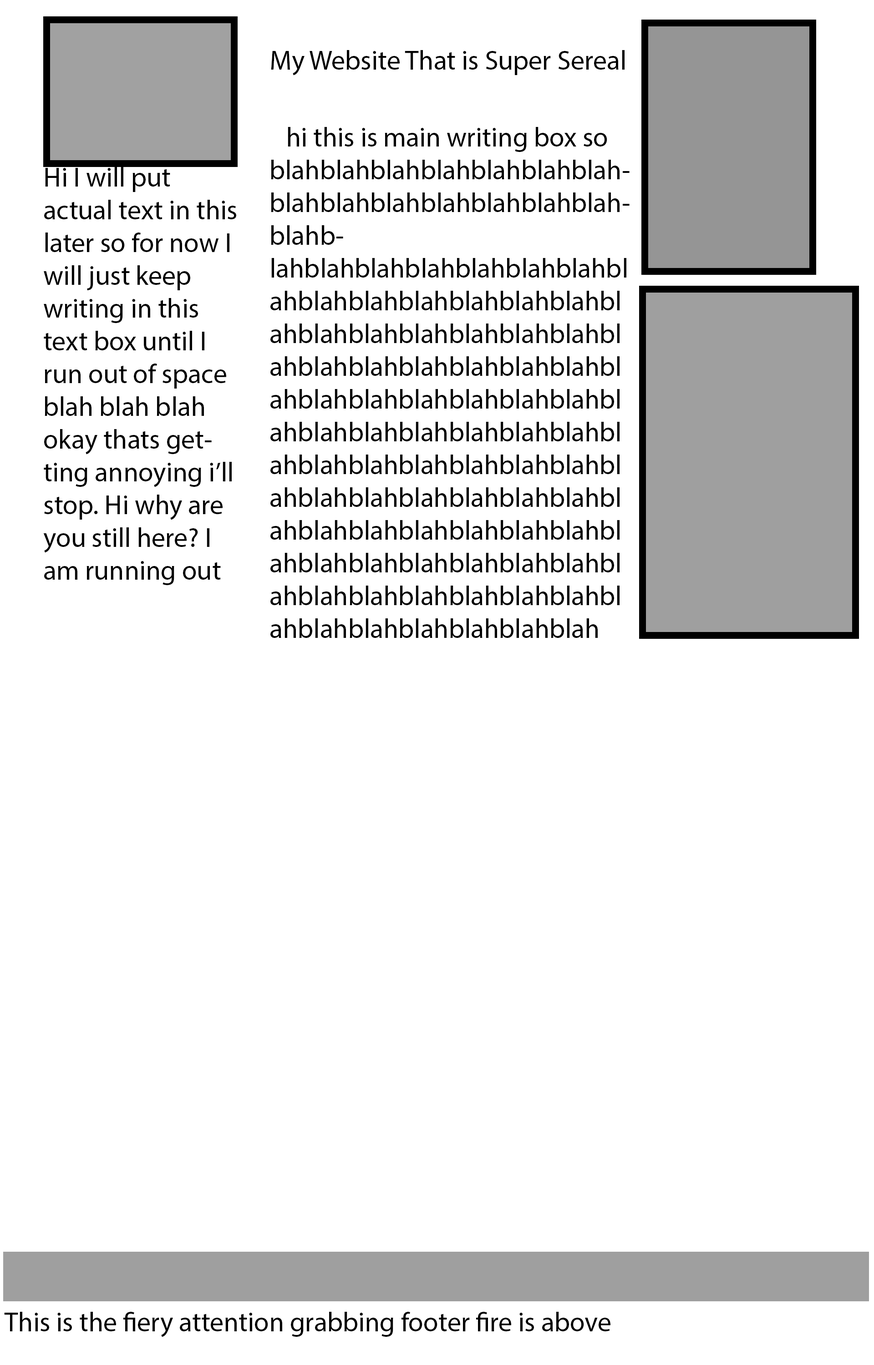
<style>
.page{position:relative;width:874px;height:1365px;background:#ffffff}
.page>*{position:absolute;margin:0}
.t1{font:27.3px "MyriadPro-Regular";color:#000000}
</style>
<div class="page">
<p class="t1" style="left:271px;top:50px;width:353px;height:26px">My Website That is Super Sereal</p>
<p class="t1" style="left:270px;top:127px;width:359px;height:511px">hi this is main writing box so blahblahblahblahblahblahblahblahblahblahblahblahblahblahblahblahblahblahblahblahblahblahblahblahblahblahblahblahblahblahblahblahblahblahblahblahblahblahblahblahblahblahblahblahblahblahblahblahblahblahblahblahblahblahblahblahblahblahblahblahblahblahblahblahblahblahblahblahblahblahblahblahblahblahblahblahblahblahblahblahblahblahblahblahblahblahblahblahblahblahblahblahblahblahblahblahblahblahblah</p>
<p class="t1" style="left:43px;top:167px;width:193px;height:418px">Hi I will put actual text in this later so for now I will just keep writing in this text box until I run out of space blah blah blah okay thats getting annoying i’ll stop. Hi why are you still here? I am running out</p>
<p class="t1" style="left:4px;top:1312px;width:606px;height:25px">This is the fiery attention grabbing footer fire is above</p>
</div>
